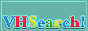
<style>
.page{position:relative;width:88px;height:31px;background:#65b3aa}
.page>*{position:absolute;margin:0}
.t1{font:16px "Baskerville-Bold"}
</style>
<div class="page">
<p class="t1" style="left:3px;top:16px;width:81px;height:11px">VHSearch!</p>
</div>
